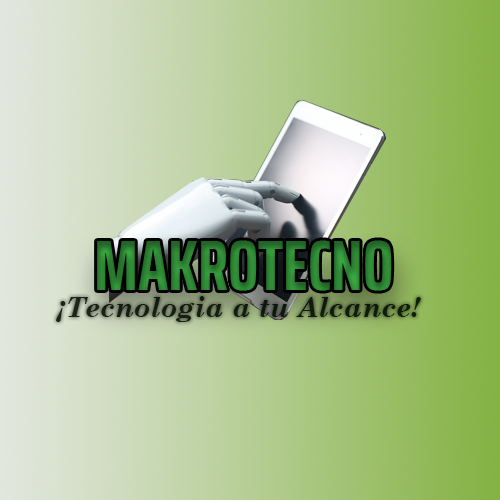
<style>
.page{position:relative;width:500px;height:500px}
.page>*{position:absolute;margin:0}
.t1{font:71.6px "SairaExtraCondensed-Bold";color:#2d8534}
.t2{font:27.8px "CenturySchoolbook-BoldItalic";color:#020c03}
</style>
<div class="page">
<p class="t1" style="left:97px;top:240px;width:295px;height:51px">MAKROTECNO</p>
<p class="t2" style="left:56px;top:296px;width:365px;height:26px;opacity:0.95">¡Tecnologia a tu Alcance!</p>
</div>
